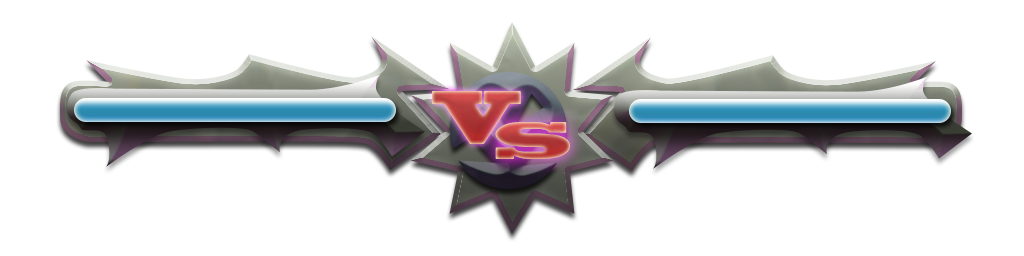
<style>
.page{position:relative;width:1024px;height:256px;background:#ffffff}
.page>*{position:absolute;margin:0}
.t1{font:70.6px "BlackoakStd";scale:0.71 1}
.t2{font:49.8px "BlackoakStd"}
</style>
<div class="page">
<p class="t1" style="left:432px;top:91px;width:89px;height:53px">V</p>
<p class="t2" style="left:495px;top:122px;width:75px;height:37px">S</p>
</div>
